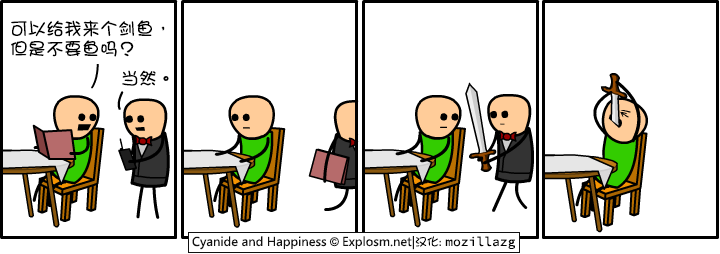
<style>
.page{position:relative;width:720px;height:254px;background:#ffffff}
.page>*{position:absolute;margin:0}
.t1{font:18px/20px "DFGirl";color:#000000}
.t2{font:18px "DFGirl";color:#000000}
</style>
<div class="page">
<p class="t1" style="left:11px;top:20px;width:154px;height:37px">可以给我来个剑鱼，<br>但是不要鱼吗？</p>
<p class="t2" style="left:122px;top:70px;width:47px;height:16px">当然。</p>
</div>
